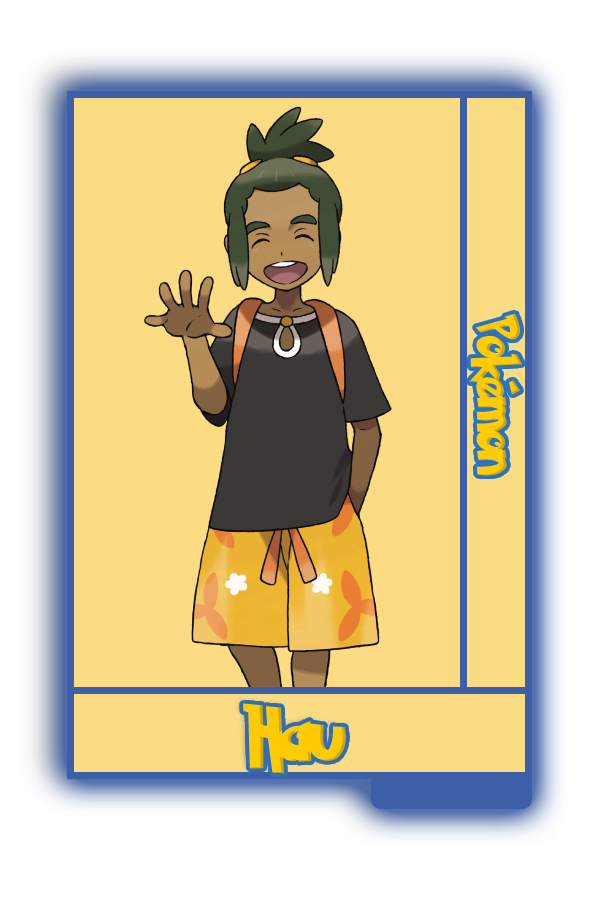
<style>
.page{position:relative;width:600px;height:900px;background:#fbdc83}
.page>*{position:absolute;margin:0}
.t1{font:48.8px "PokemonSolidNormal";color:#ffcb05;scale:0.8 1}
.t2{font:60.1px "PokemonSolidNormal";color:#ffcb05;scale:0.96 1}
</style>
<div class="page">
<p class="t1" style="left:469px;top:313px;width:54px;height:163px;rotate:90deg">Pokémon</p>
<p class="t2" style="left:243px;top:703px;width:103px;height:70px">Hau</p>
</div>
